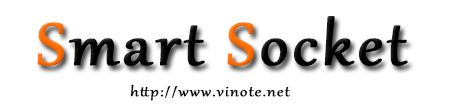
<style>
.page{position:relative;width:462px;height:106px;background:#ffffff}
.page>*{position:absolute;margin:0}
.t1{font:72.6px "Gabriola";letter-spacing:0.04em;color:#000000;font-weight:bold;scale:1.07 1}
.t2{font:72.6px "Gabriola";letter-spacing:0.04em;color:#ff6d02;font-weight:bold;scale:1.07 1}
.t3{font:16.9px "Gabriola";letter-spacing:0.04em;color:#000000;font-weight:bold;scale:1.19 1}
</style>
<div class="page">
<p class="t1" style="left:37px;top:16px;width:371px;height:50px"><span class="t2">S</span>mart<span class="t2"> S</span>ocket</p>
<p class="t3" style="left:130px;top:84px;width:160px;height:17px">http://www.vinote.net</p>
</div>
